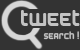
<style>
.page{position:relative;width:80px;height:50px;background:#333333}
.page>*{position:absolute;margin:0}
.t1{font:19.5px "AirstripFour";color:#c3c3c3}
.t2{font:9px "AirstripFour";color:#c3c3c3;scale:0.92 1}
</style>
<div class="page">
<p class="t1" style="left:21px;top:10px;width:59px;height:16px">Tweet</p>
<p class="t2" style="left:43px;top:31px;width:36px;height:9px">search !</p>
</div>
